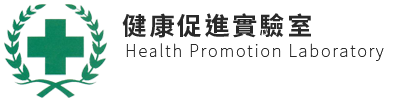
<style>
.page{position:relative;width:410px;height:100px;background:#ffffff}
.page>*{position:absolute;margin:0}
.t1{font:25px "NotoSansMonoCJKtc-Bold";letter-spacing:0.1em;color:#292929}
.t2{font:16.7px "NotoSansCJKtc-Thin";letter-spacing:0.1em;color:#292929}
</style>
<div class="page">
<p class="t1" style="left:122px;top:13px;width:189px;height:25px">健康促進實驗室</p>
<p class="t2" style="left:126px;top:43px;width:258px;height:18px">Health Promotion Laboratory</p>
</div>
